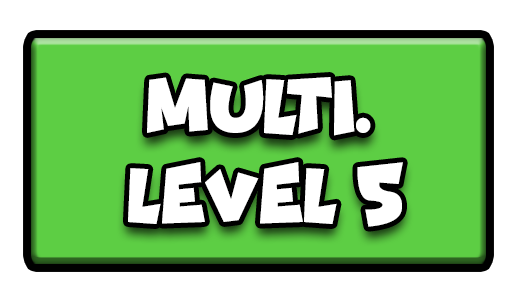
<style>
.page{position:relative;width:517px;height:301px;background:#ffffff}
.page>*{position:absolute;margin:0}
.t1{font:77.7px "Funhouse";color:#ffffff;scale:0.95 1}
</style>
<div class="page">
<p class="t1" style="left:147px;top:77px;width:224px;height:59px">MULTI.</p>
<p class="t1" style="left:128px;top:162px;width:275px;height:65px">LEVEL 5</p>
</div>
